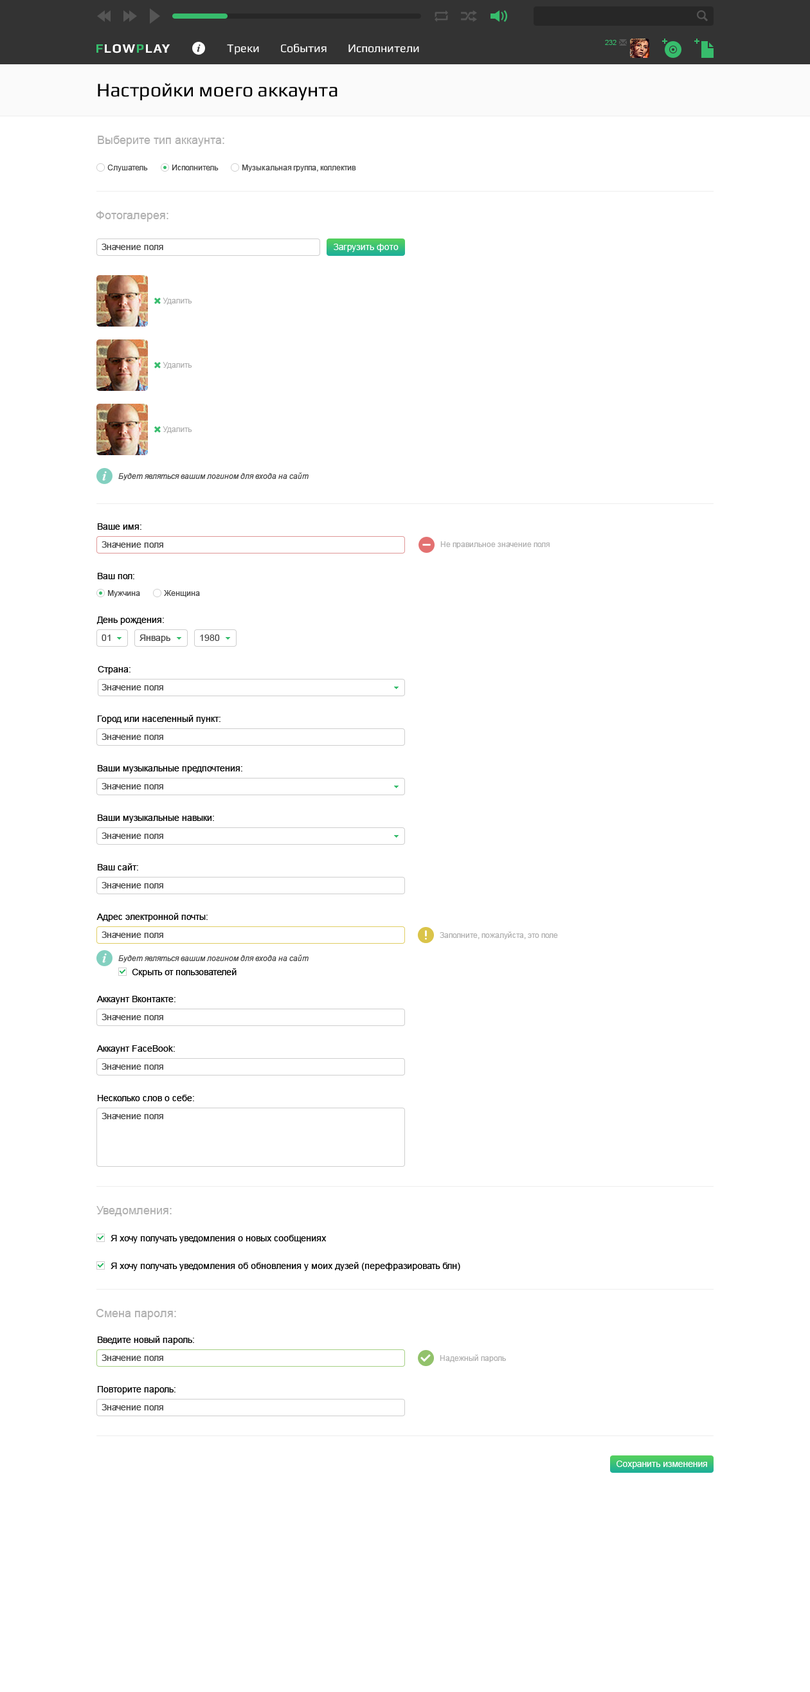
<style>
.page{position:relative;width:810px;height:1692px;background:#ffffff}
.page>*{position:absolute;margin:0}
.t1{font:19.3px "Play";color:#000000}
.t2{font:11.6px "ArialMT";color:#afafaf}
.t3{font:7.7px "ArialMT";color:#444444}
.t4{font:9px "ArialMT";color:#444444}
.t5{font:9px "ArialMT";color:#ffffff}
.t6{font:7.7px "ArialMT";color:#afafaf}
.t7{font:7.7px "Arial-ItalicMT";color:#444444}
.t8{font:9px "ArialMT";color:#000000}
</style>
<div class="page">
<p class="t1" style="left:98px;top:83px;width:240px;height:17px">Настройки моего аккаунта</p>
<p class="t2" style="left:98px;top:136px;width:126px;height:11px">Выберите тип аккаунта:</p>
<p class="t3" style="left:107px;top:165px;width:41px;height:7px">Слушатель</p>
<p class="t3" style="left:172px;top:165px;width:47px;height:5px">Исполнитель</p>
<p class="t3" style="left:242px;top:165px;width:114px;height:7px">Музыкальная группа, коллектив</p>
<p class="t2" style="left:96px;top:211px;width:72px;height:11px">Фотогалерея:</p>
<p class="t4" style="left:102px;top:244px;width:61px;height:6px">Значение поля</p>
<p class="t5" style="left:334px;top:244px;width:65px;height:8px">Загрузить фото</p>
<p class="t6" style="left:163px;top:298px;width:29px;height:7px">Удалить</p>
<p class="t6" style="left:163px;top:362px;width:29px;height:7px">Удалить</p>
<p class="t6" style="left:163px;top:426px;width:29px;height:7px">Удалить</p>
<p class="t7" style="left:118px;top:473px;width:191px;height:7px">Будет являться вашим логином для входа на сайт</p>
<p class="t8" style="left:98px;top:523px;width:43px;height:7px">Ваше имя:</p>
<p class="t4" style="left:102px;top:541px;width:61px;height:7px">Значение поля</p>
<p class="t6" style="left:440px;top:541px;width:110px;height:7px">Не правильное значение поля</p>
<p class="t8" style="left:98px;top:573px;width:36px;height:6px">Ваш пол:</p>
<p class="t3" style="left:108px;top:590px;width:32px;height:7px">Мужчина</p>
<p class="t3" style="left:164px;top:590px;width:36px;height:7px">Женщина</p>
<p class="t8" style="left:96px;top:616px;width:68px;height:9px">День рождения:</p>
<p class="t4" style="left:102px;top:634px;width:9px;height:7px">01</p>
<p class="t4" style="left:140px;top:634px;width:30px;height:9px">Январь</p>
<p class="t4" style="left:200px;top:634px;width:20px;height:7px">1980</p>
<p class="t8" style="left:98px;top:666px;width:32px;height:8px">Страна:</p>
<p class="t4" style="left:102px;top:684px;width:61px;height:6px">Значение поля</p>
<p class="t8" style="left:98px;top:715px;width:123px;height:9px">Город или населенный пункт:</p>
<p class="t4" style="left:102px;top:734px;width:61px;height:6px">Значение поля</p>
<p class="t8" style="left:98px;top:765px;width:144px;height:8px">Ваши музыкальные предпочтения:</p>
<p class="t4" style="left:102px;top:783px;width:61px;height:6px">Значение поля</p>
<p class="t8" style="left:98px;top:815px;width:116px;height:8px">Ваши музыкальные навыки:</p>
<p class="t4" style="left:102px;top:833px;width:61px;height:6px">Значение поля</p>
<p class="t8" style="left:98px;top:863px;width:40px;height:7px">Ваш сайт:</p>
<p class="t4" style="left:102px;top:882px;width:61px;height:6px">Значение поля</p>
<p class="t8" style="left:96px;top:913px;width:112px;height:9px">Адрес электронной почты:</p>
<p class="t4" style="left:102px;top:932px;width:61px;height:6px">Значение поля</p>
<p class="t6" style="left:440px;top:932px;width:118px;height:7px">Заполните, пожалуйста, это поле</p>
<p class="t7" style="left:118px;top:955px;width:191px;height:7px">Будет являться вашим логином для входа на сайт</p>
<p class="t8" style="left:132px;top:968px;width:105px;height:9px">Скрыть от пользователей</p>
<p class="t8" style="left:96px;top:996px;width:80px;height:8px">Аккаунт Вконтакте:</p>
<p class="t4" style="left:102px;top:1014px;width:61px;height:6px">Значение поля</p>
<p class="t8" style="left:96px;top:1045px;width:79px;height:9px">Аккаунт FaсeBook:</p>
<p class="t4" style="left:102px;top:1063px;width:61px;height:7px">Значение поля</p>
<p class="t8" style="left:98px;top:1095px;width:96px;height:6px">Несколько слов о себе:</p>
<p class="t4" style="left:102px;top:1113px;width:61px;height:6px">Значение поля</p>
<p class="t2" style="left:96px;top:1206px;width:76px;height:10px">Уведомления:</p>
<p class="t8" style="left:111px;top:1235px;width:216px;height:8px">Я хочу получать уведомления о новых сообщениях</p>
<p class="t8" style="left:111px;top:1262px;width:349px;height:9px">Я хочу получать уведомления об обновления у моих дузей (перефразировать блн)</p>
<p class="t2" style="left:96px;top:1309px;width:80px;height:11px">Смена пароля:</p>
<p class="t8" style="left:98px;top:1336px;width:96px;height:9px">Введите новый пароль:</p>
<p class="t4" style="left:102px;top:1354px;width:61px;height:7px">Значение поля</p>
<p class="t6" style="left:440px;top:1354px;width:66px;height:8px">Надежный пароль</p>
<p class="t8" style="left:98px;top:1386px;width:78px;height:8px">Повторите пароль:</p>
<p class="t4" style="left:102px;top:1404px;width:61px;height:6px">Значение поля</p>
<p class="t5" style="left:616px;top:1461px;width:91px;height:8px">Сохранить изменения</p>
</div>
